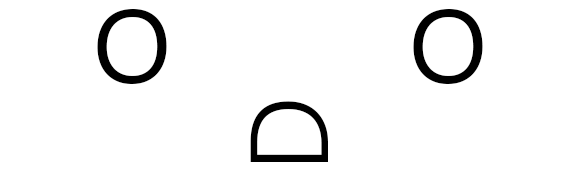
<style>
.page{position:relative;width:581px;height:170px;background:#ffffff}
.page>*{position:absolute;margin:0}
.t1{font:142.8px "NirmalaUI-Semilight";color:#000000}
.t2{font:110.4px "NirmalaUI-Semilight";color:#000000}
</style>
<div class="page">
<p class="t1" style="left:97px;top:9px;width:386px;height:75px">o      o</p>
<p class="t2" style="left:250px;top:101px;width:78px;height:61px;rotate:-90deg">D</p>
</div>
